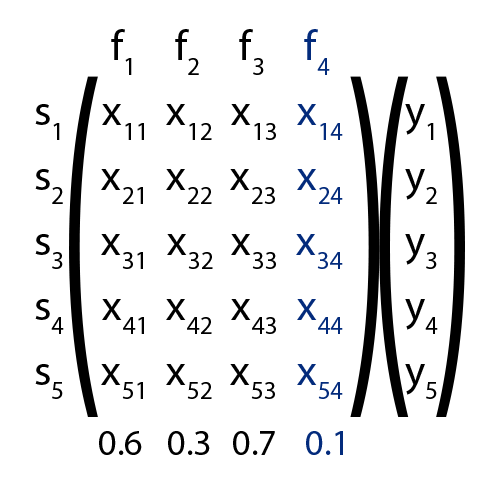
<style>
.page{position:relative;width:480px;height:480px;background:#ffffff}
.page>*{position:absolute;margin:0}
.t1{font:43.2px "MyriadPro-Regular";color:#000000}
.t2{font:43.2px "MyriadPro-Regular";color:#000000;font-variant:small-caps}
.t3{font:43.2px "MyriadPro-Regular";color:#032b7c}
.t4{font:43.2px "MyriadPro-Regular";color:#032b7c;font-variant:small-caps}
.t5{font:36px "MyriadPro-Regular";color:#000000}
.t6{font:36px "MyriadPro-Regular";color:#032b7c}
</style>
<div class="page">
<p class="t1" style="left:111px;top:29px;width:21px;height:46px">f<span class="t2">1</span></p>
<p class="t1" style="left:175px;top:29px;width:24px;height:46px">f2</p>
<p class="t1" style="left:239px;top:29px;width:25px;height:46px">f<span class="t2">3</span></p>
<p class="t3" style="left:304px;top:29px;width:26px;height:46px">f<span class="t4">4</span></p>
<p class="t1" style="left:35px;top:104px;width:25px;height:36px">s<span class="t2">1</span></p>
<p class="t2" style="left:102px;top:104px;width:42px;height:36px"><span class="t1">x</span>11</p>
<p class="t2" style="left:166px;top:104px;width:46px;height:36px"><span class="t1">x</span>12</p>
<p class="t2" style="left:231px;top:104px;width:45px;height:36px"><span class="t1">x</span>13</p>
<p class="t4" style="left:297px;top:104px;width:46px;height:36px"><span class="t3">x</span>14</p>
<p class="t1" style="left:405px;top:104px;width:29px;height:36px">y<span class="t2">1</span></p>
<p class="t1" style="left:35px;top:169px;width:28px;height:35px">s<span class="t2">2</span></p>
<p class="t2" style="left:101px;top:169px;width:42px;height:35px"><span class="t1">x</span>21</p>
<p class="t2" style="left:166px;top:169px;width:46px;height:35px"><span class="t1">x</span>22</p>
<p class="t2" style="left:230px;top:169px;width:45px;height:35px"><span class="t1">x</span>23</p>
<p class="t4" style="left:297px;top:169px;width:46px;height:35px"><span class="t3">x</span>24</p>
<p class="t1" style="left:405px;top:169px;width:32px;height:35px">y<span class="t2">2</span></p>
<p class="t1" style="left:35px;top:234px;width:28px;height:35px">s<span class="t2">3</span></p>
<p class="t2" style="left:101px;top:234px;width:42px;height:35px"><span class="t1">x</span>31</p>
<p class="t2" style="left:167px;top:234px;width:46px;height:35px"><span class="t1">x</span>32</p>
<p class="t2" style="left:231px;top:234px;width:45px;height:35px"><span class="t1">x</span>33</p>
<p class="t4" style="left:296px;top:234px;width:47px;height:35px"><span class="t3">x</span>34</p>
<p class="t1" style="left:405px;top:234px;width:32px;height:35px">y<span class="t2">3</span></p>
<p class="t1" style="left:35px;top:299px;width:29px;height:35px">s<span class="t2">4</span></p>
<p class="t2" style="left:102px;top:299px;width:42px;height:35px"><span class="t1">x</span>41</p>
<p class="t2" style="left:166px;top:299px;width:46px;height:35px"><span class="t1">x</span>42</p>
<p class="t2" style="left:231px;top:299px;width:45px;height:35px"><span class="t1">x</span>43</p>
<p class="t4" style="left:297px;top:299px;width:46px;height:35px"><span class="t3">x</span>44</p>
<p class="t1" style="left:405px;top:299px;width:33px;height:35px">y<span class="t2">4</span></p>
<p class="t1" style="left:35px;top:364px;width:28px;height:35px">s5</p>
<p class="t2" style="left:101px;top:364px;width:42px;height:35px"><span class="t1">x</span>51</p>
<p class="t2" style="left:166px;top:364px;width:46px;height:35px"><span class="t1">x</span>52</p>
<p class="t2" style="left:230px;top:364px;width:45px;height:35px"><span class="t1">x</span>53</p>
<p class="t4" style="left:297px;top:364px;width:46px;height:35px"><span class="t3">x</span>54</p>
<p class="t1" style="left:405px;top:364px;width:32px;height:35px">y<span class="t2">5</span></p>
<p class="t5" style="left:99px;top:431px;width:43px;height:24px">0.6</p>
<p class="t5" style="left:168px;top:431px;width:42px;height:24px">0.3</p>
<p class="t5" style="left:233px;top:431px;width:42px;height:24px">0.7</p>
<p class="t6" style="left:306px;top:431px;width:37px;height:24px">0.1</p>
</div>
